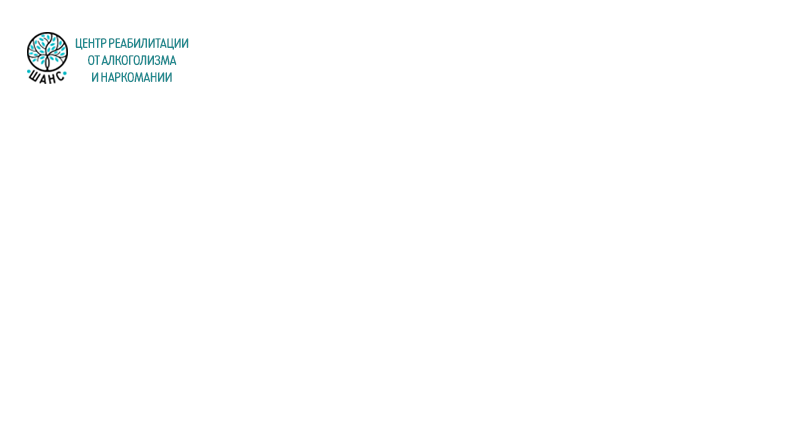
<style>
.page{position:relative;width:800px;height:436px;background:#ffffff}
.page>*{position:absolute;margin:0}
.t1{font:14px "Matias";letter-spacing:-0.05em;color:#248a8f;text-transform:uppercase}
</style>
<div class="page">
<p class="t1" style="left:75px;top:38px;width:114px;height:45px;text-align:center">Центр реабилитации<br> от алкоголизма <br>и наркомании</p>
</div>
